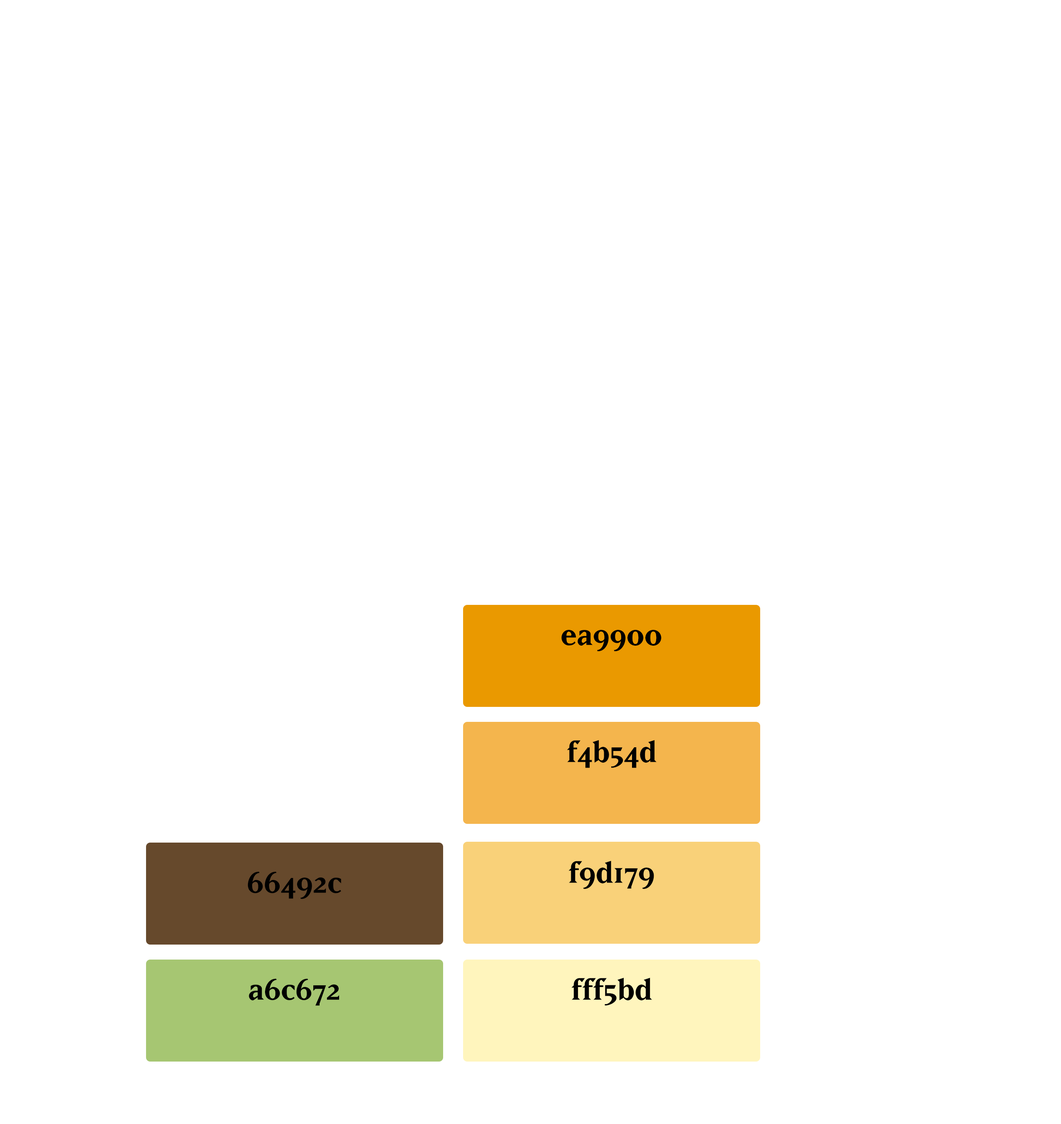
<style>
.page{position:relative;width:1061px;height:1124px;background:#ffffff}
.page>*{position:absolute;margin:0}
.t1{font:34.7px "MatrixBold";color:#000000}
</style>
<div class="page">
<p class="t1" style="left:561px;top:630px;width:101px;height:21px">ea9900</p>
<p class="t1" style="left:567px;top:740px;width:90px;height:28px">f4b54d</p>
<p class="t1" style="left:568px;top:860px;width:86px;height:29px">f9d179</p>
<p class="t1" style="left:248px;top:871px;width:93px;height:28px">66492c</p>
<p class="t1" style="left:571px;top:977px;width:82px;height:28px">fff5bd</p>
<p class="t1" style="left:249px;top:978px;width:91px;height:27px">a6c672</p>
</div>
